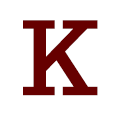
<style>
.page{position:relative;width:120px;height:120px;background:#ffffff}
.page>*{position:absolute;margin:0}
.t1{font:89.1px "CardCharacters";letter-spacing:0.002em;color:#660000;scale:1.52 1}
</style>
<div class="page">
<p class="t1" style="left:23px;top:20px;width:75px;height:76px">K</p>
</div>
